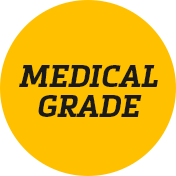
<style>
.page{position:relative;width:176px;height:176px;background:#ffc000}
.page>*{position:absolute;margin:0}
.t1{font:30px/30px "MetronicSlabProBold-Italic";color:#1a1a1a}
</style>
<div class="page">
<p class="t1" style="left:19px;top:65px;width:139px;height:52px;text-align:center">MEDICAL<br>GRADE</p>
</div>
